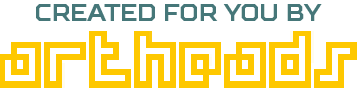
<style>
.page{position:relative;width:358px;height:88px;background:#ffffff}
.page>*{position:absolute;margin:0}
.t1{font:24px "SquaresBold";letter-spacing:-0.025em;color:#467779}
</style>
<div class="page">
<p class="t1" style="left:36px;top:4px;width:286px;height:17px">created for you by</p>
</div>
